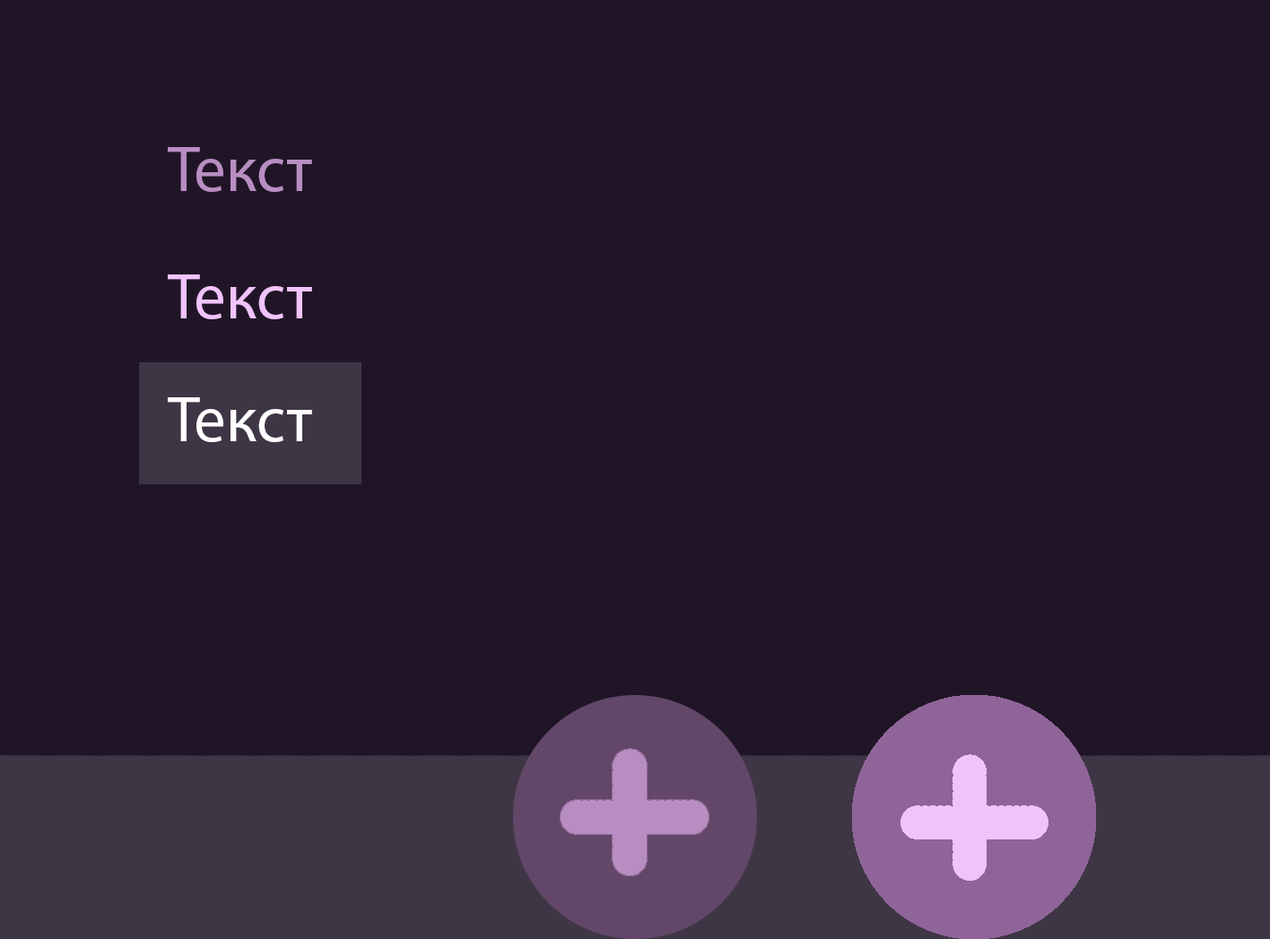
<style>
.page{position:relative;width:1270px;height:939px;background:#201526}
.page>*{position:absolute;margin:0}
.t1{font:64.6px "MyriadPro-Regular";color:#b88dc2}
.t2{font:64.6px "MyriadPro-Regular";color:#f1c3fd}
.t3{font:64.6px "MyriadPro-Regular";color:#ffffff}
</style>
<div class="page">
<p class="t1" style="left:168px;top:147px;width:144px;height:45px">Текст</p>
<p class="t2" style="left:168px;top:274px;width:144px;height:45px">Текст</p>
<p class="t3" style="left:168px;top:397px;width:144px;height:45px">Текст</p>
</div>
